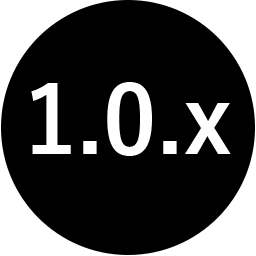
<style>
.page{position:relative;width:256px;height:256px;background:#000000}
.page>*{position:absolute;margin:0}
.t1{font:93.2px "YuGothic-Bold";color:#ffffff}
</style>
<div class="page">
<p class="t1" style="left:31px;top:82px;width:200px;height:74px">1.0.x</p>
</div>
